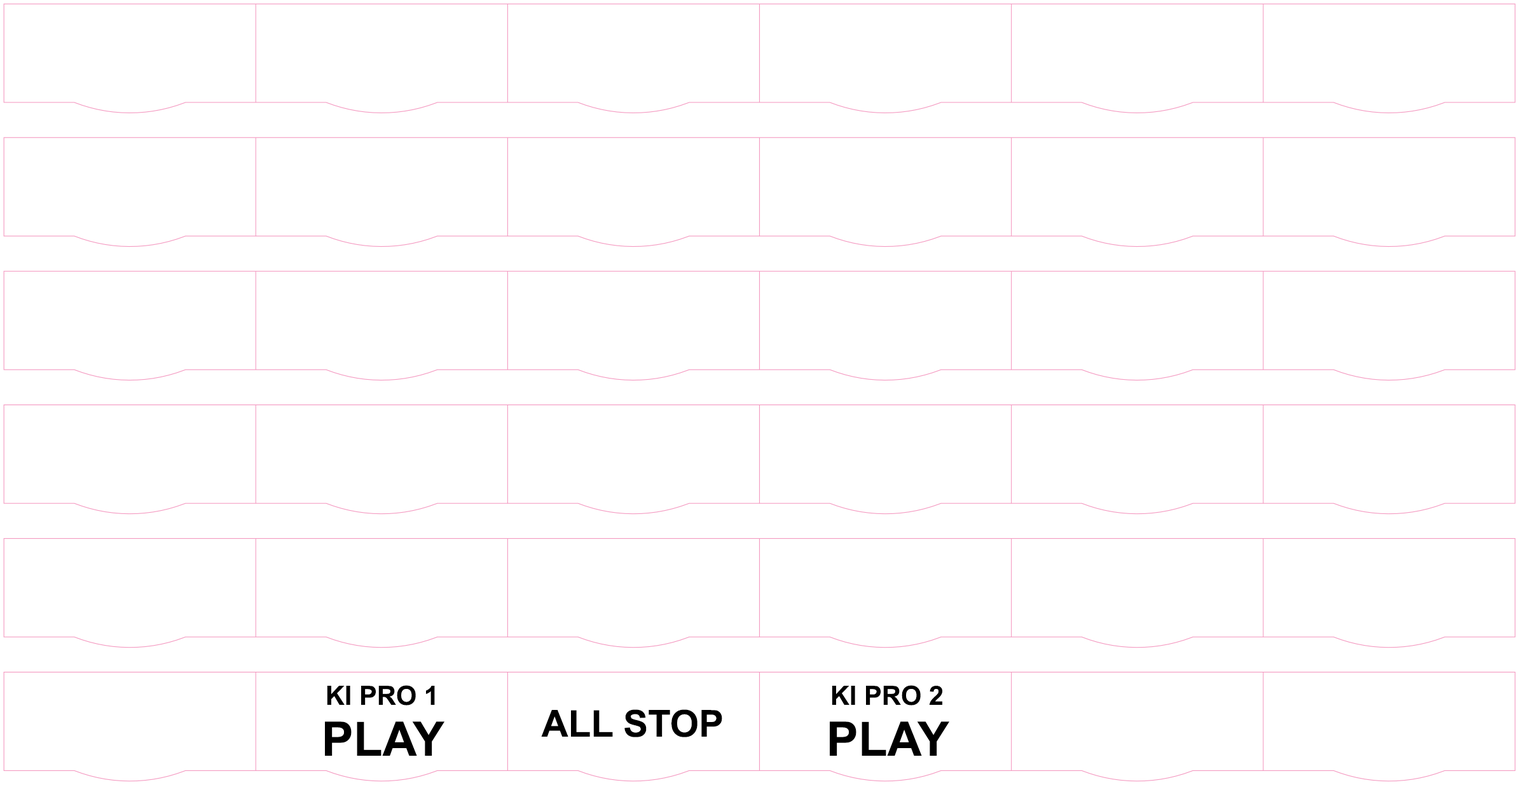
<style>
.page{position:relative;width:1519px;height:785px;background:#ffffff}
.page>*{position:absolute;margin:0}
.t1{font:26.5px "Arial-BoldMT";color:#000000}
.t2{font:37.1px "Arial-BoldMT";color:#000000}
.t3{font:47.7px "Arial-BoldMT";color:#000000}
</style>
<div class="page">
<p class="t1" style="left:327px;top:685px;width:108px;height:20px">KI PRO 1</p>
<p class="t1" style="left:832px;top:685px;width:111px;height:20px">KI PRO 2</p>
<p class="t2" style="left:541px;top:709px;width:181px;height:28px">ALL STOP</p>
<p class="t3" style="left:325px;top:721px;width:120px;height:35px">PLAY</p>
<p class="t3" style="left:830px;top:721px;width:120px;height:35px">PLAY</p>
</div>
